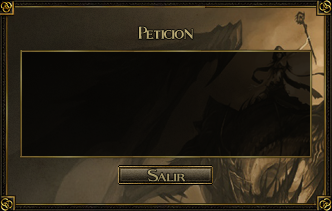
<style>
.page{position:relative;width:332px;height:211px}
.page>*{position:absolute;margin:0}
.t1{font:33.3px "Fleet-Street";color:#c9b779;scale:0.94 1}
.t2{font:30px "Fleet-Street";color:#a29466}
</style>
<div class="page">
<p class="t1" style="left:138px;top:26px;width:55px;height:14px;opacity:0.85">Peticion</p>
<p class="t2" style="left:147px;top:169px;width:39px;height:13px">Salir</p>
</div>
